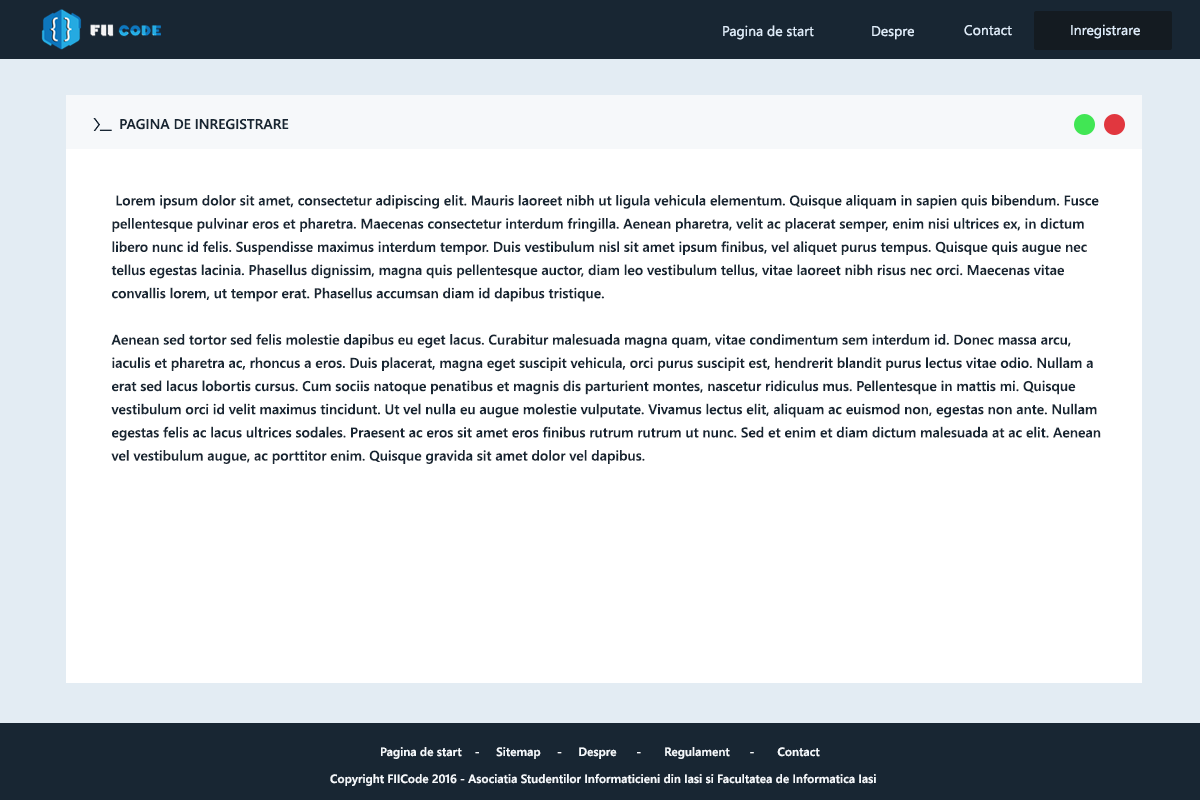
<style>
.page{position:relative;width:1200px;height:800px;background:#ffffff}
.page>*{position:absolute;margin:0}
.t1{font:14px "SegoeUI";color:#deecfa}
.t2{font:14px "SegoeUI-Semibold";color:#182633}
.t3{font:14px/23.2px "SegoeUI-Semibold";color:#182633}
.t4{font:12px "SegoeUI-Semibold";color:#f4f8fc}
</style>
<div class="page">
<p class="t1" style="left:723px;top:25px;width:91px;height:15px">Pagina de start</p>
<p class="t1" style="left:872px;top:26px;width:42px;height:14px">Despre</p>
<p class="t1" style="left:964px;top:25px;width:48px;height:11px">Contact</p>
<p class="t1" style="left:1071px;top:24px;width:69px;height:15px">Inregistrare</p>
<p class="t2" style="left:120px;top:119px;width:169px;height:11px">PAGINA DE INREGISTRARE</p>
<p class="t3" style="left:111px;top:195px;width:990px;height:269px">Lorem ipsum dolor sit amet, consectetur adipiscing elit. Mauris laoreet nibh ut ligula vehicula elementum. Quisque aliquam in sapien quis bibendum. Fusce pellentesque pulvinar eros et pharetra. Maecenas consectetur interdum fringilla. Aenean pharetra, velit ac placerat semper, enim nisi ultrices ex, in dictum libero nunc id felis. Suspendisse maximus interdum tempor. Duis vestibulum nisl sit amet ipsum finibus, vel aliquet purus tempus. Quisque quis augue nec tellus egestas lacinia. Phasellus dignissim, magna quis pellentesque auctor, diam leo vestibulum tellus, vitae laoreet nibh risus nec orci. Maecenas vitae convallis lorem, ut tempor erat. Phasellus accumsan diam id dapibus tristique.<br><br>Aenean sed tortor sed felis molestie dapibus eu eget lacus. Curabitur malesuada magna quam, vitae condimentum sem interdum id. Donec massa arcu, iaculis et pharetra ac, rhoncus a eros. Duis placerat, magna eget suscipit vehicula, orci purus suscipit est, hendrerit blandit purus lectus vitae odio. Nullam a erat sed lacus lobortis cursus. Cum sociis natoque penatibus et magnis dis parturient montes, nascetur ridiculus mus. Pellentesque in mattis mi. Quisque vestibulum orci id velit maximus tincidunt. Ut vel nulla eu augue molestie vulputate. Vivamus lectus elit, aliquam ac euismod non, egestas non ante. Nullam egestas felis ac lacus ultrices sodales. Praesent ac eros sit amet eros finibus rutrum rutrum ut nunc. Sed et enim et diam dictum malesuada at ac elit. Aenean vel vestibulum augue, ac porttitor enim. Quisque gravida sit amet dolor vel dapibus.</p>
<p class="t4" style="left:381px;top:747px;width:439px;height:12px">Pagina de start    -     Sitemap     -     Despre      -       Regulament      -       Contact</p>
<p class="t4" style="left:330px;top:773px;width:546px;height:13px">Copyright FIICode 2016 - Asociatia Studentilor Informaticieni din Iasi si Facultatea de Informatica Iasi</p>
</div>
